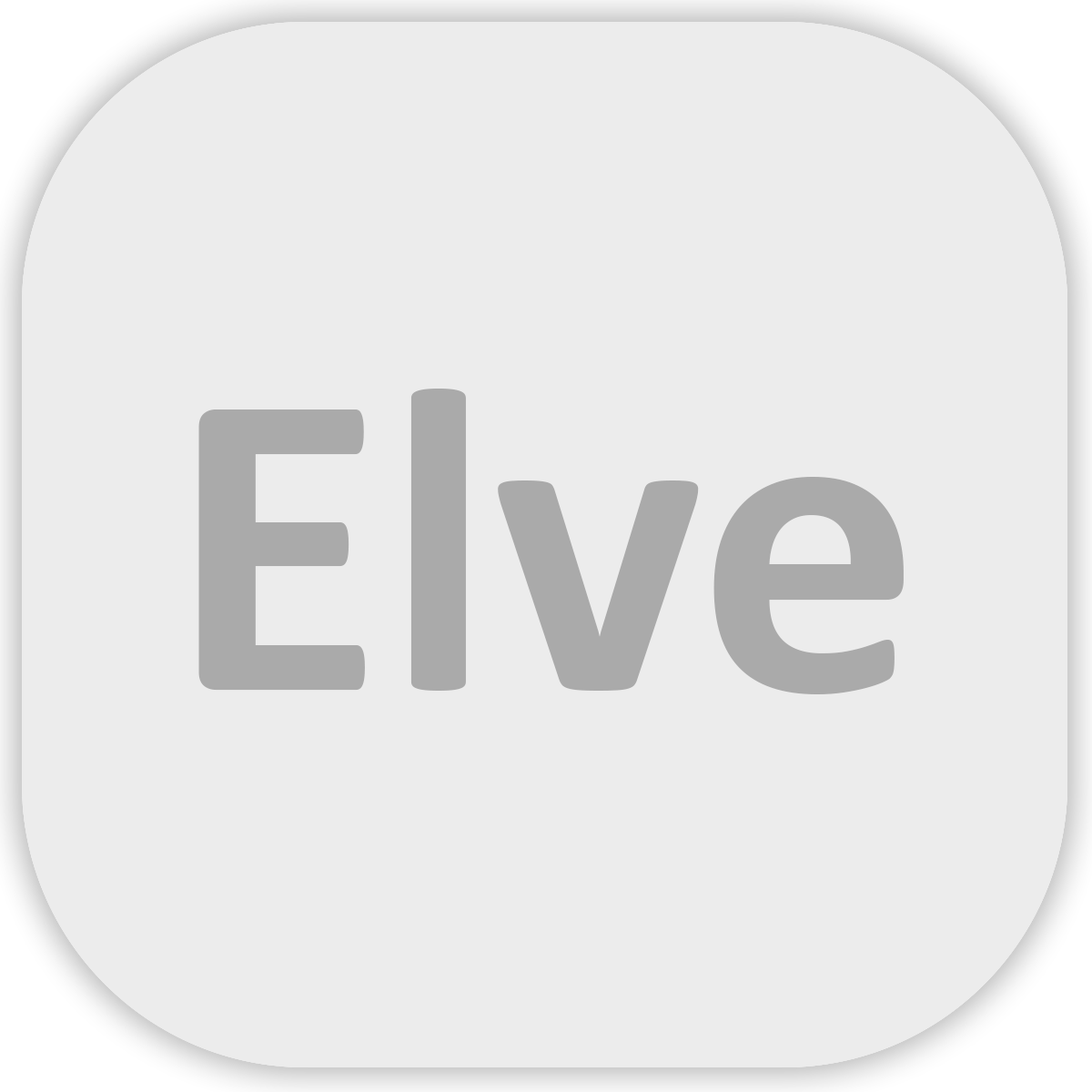
<style>
.page{position:relative;width:1092px;height:1092px;background:#ececec}
.page>*{position:absolute;margin:0}
.t1{font:442.8px "Calibri-Bold";color:#aaaaaa}
</style>
<div class="page">
<p class="t1" style="left:198px;top:389px;width:706px;height:305px">Elve</p>
</div>
